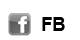
<style>
.page{position:relative;width:80px;height:40px;background:#ffffff}
.page>*{position:absolute;margin:0}
.t1{font:19.4px "Arial-BoldMT";letter-spacing:-0.05em;color:#000000}
</style>
<div class="page">
<p class="t1" style="left:42px;top:17px;width:23px;height:14px">FB</p>
</div>
